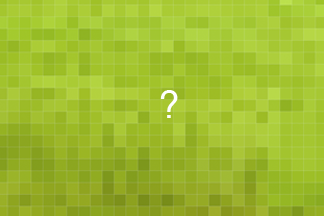
<style>
.page{position:relative;width:324px;height:216px}
.page>*{position:absolute;margin:0}
.t1{font:37.9px "Helvetica";letter-spacing:0.035em;color:#ffffff;text-transform:uppercase}
</style>
<div class="page">
<p class="t1" style="left:160px;top:90px;width:18px;height:28px">?</p>
</div>
